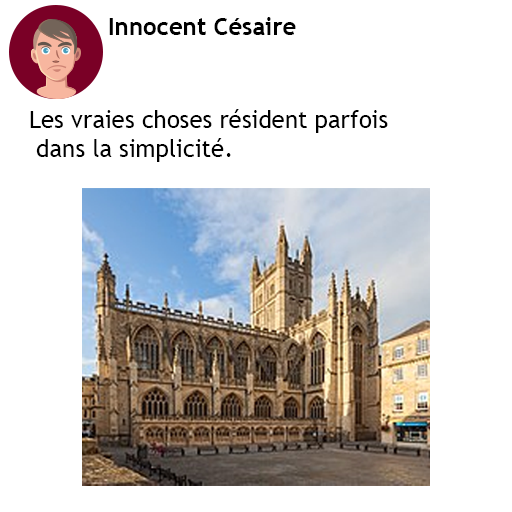
<style>
.page{position:relative;width:512px;height:512px;background:#ffffff}
.page>*{position:absolute;margin:0}
.t1{font:24px "TrebuchetMS-Bold";color:#000000}
.t2{font:24px "TrebuchetMS";color:#000000}
</style>
<div class="page">
<p class="t1" style="left:109px;top:17px;width:187px;height:18px">Innocent Césaire</p>
<p class="t2" style="left:30px;top:109px;width:358px;height:53px">Les vraies choses résident parfois<br> dans la simplicité.</p>
</div>
